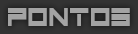
<style>
.page{position:relative;width:138px;height:34px;background:#a3a3a3}
.page>*{position:absolute;margin:0}
.t1{font:32px "MegatonExtras";color:#a3a3a3;scale:0.76 1}
</style>
<div class="page">
<p class="t1" style="left:8px;top:8px;width:122px;height:18px">PONTOS</p>
</div>
